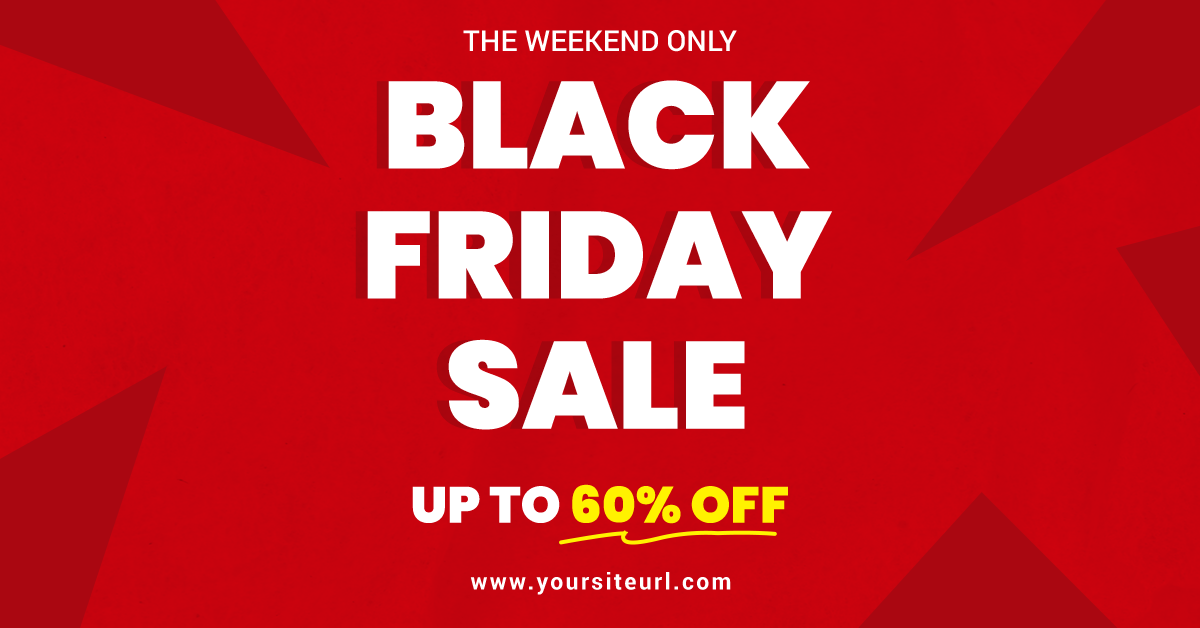
<style>
.page{position:relative;width:1200px;height:628px}
.page>*{position:absolute;margin:0}
.t1{font:29px "Roboto-Medium";color:#ffffff;text-transform:uppercase}
.t2{font:123px/130px "Poppins-Black";color:#ffffff;text-transform:uppercase}
.t3{font:51px "Poppins-Black";color:#fff200;text-transform:uppercase}
.t4{font:51px "Poppins-Black";color:#ffffff;text-transform:uppercase}
.t5{font:23px "Roboto-Bold";letter-spacing:0.1em;color:#ffffff}
</style>
<div class="page">
<p class="t1" style="left:463px;top:30px;width:274px;height:22px">The weekend only</p>
<p class="t2" style="left:367px;top:80px;width:465px;height:350px;text-align:center">black<br>friday<br>sale</p>
<p class="t3" style="left:412px;top:484px;width:376px;height:40px"><span class="t4">up to </span>60% off</p>
<p class="t5" style="left:470px;top:572px;width:261px;height:23px">www.yoursiteurl.com</p>
</div>
